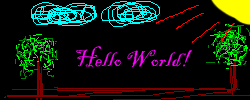
<style>
.page{position:relative;width:250px;height:100px;background:#000000}
.page>*{position:absolute;margin:0}
.t1{font:24px "BlackadderITC-Regular";color:#ff00ff}
</style>
<div class="page">
<p class="t1" style="left:76px;top:46px;width:116px;height:21px">Hello World!</p>
</div>
